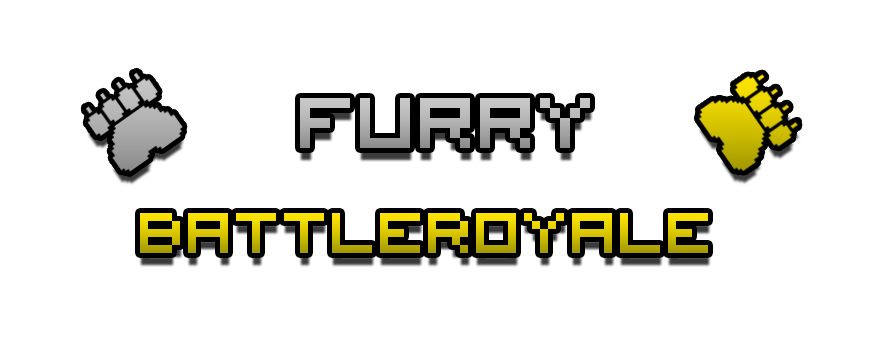
<style>
.page{position:relative;width:881px;height:356px;background:#ffffff}
.page>*{position:absolute;margin:0}
.t1{font:100px "VisitorTT1BRK";color:#b4b4b4}
.t2{font:80px "VisitorTT1BRK"}
</style>
<div class="page">
<p class="t1" style="left:300px;top:98px;width:290px;height:50px">Furry</p>
<p class="t2" style="left:140px;top:213px;width:568px;height:40px">BattleRoyale</p>
</div>
